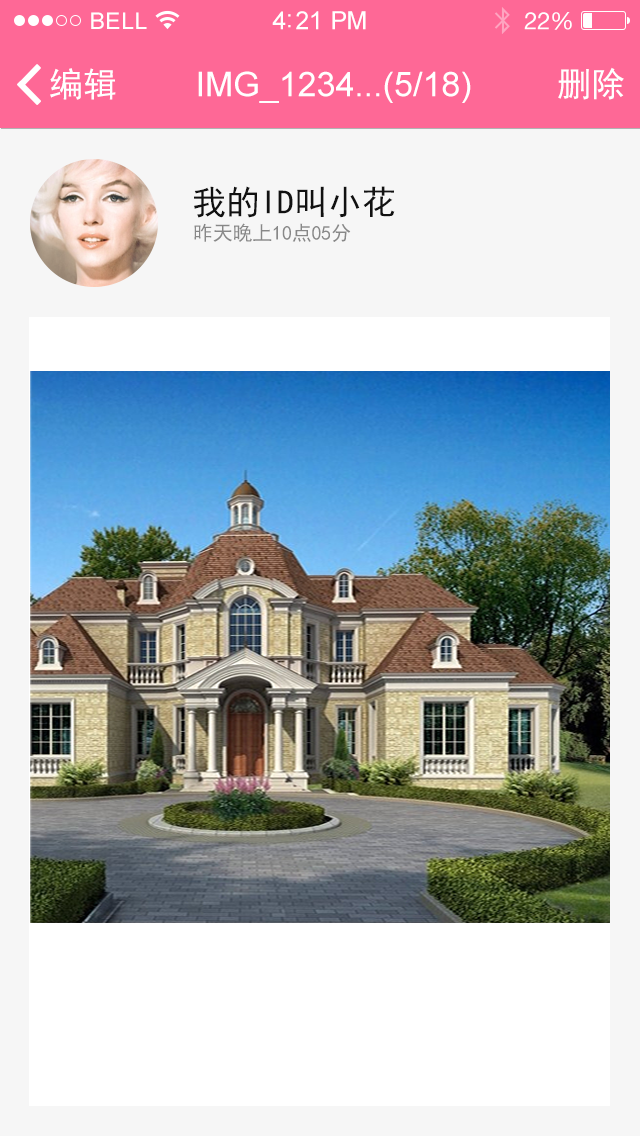
<style>
.page{position:relative;width:640px;height:1136px;background:#f6f6f6}
.page>*{position:absolute;margin:0}
.t1{font:23px "ArialMT";letter-spacing:0.02em;color:#ffffff}
.t2{font:25px "ArialMT";letter-spacing:-0.02em;color:#ffffff}
.t3{font:24px "HelveticaNeue";letter-spacing:-0.02em;color:#ffffff}
.t4{font:34px "SimHei";color:#ffffff}
.t5{font:34px "ArialMT";color:#ffffff}
.t6{font:34px "SimHei";color:#111111}
.t7{font:20px "SimHei";letter-spacing:-0.01em;color:#888888}
</style>
<div class="page">
<p class="t1" style="left:91px;top:12px;width:56px;height:17px">BELL</p>
<p class="t2" style="left:272px;top:11px;width:94px;height:19px">4:21 PM</p>
<p class="t3" style="left:524px;top:12px;width:48px;height:18px">22%</p>
<p class="t4" style="left:50px;top:68px;width:66px;height:32px">编辑</p>
<p class="t5" style="left:198px;top:71px;width:273px;height:32px">IMG_1234...(5/18)</p>
<p class="t4" style="left:558px;top:67px;width:66px;height:33px">删除</p>
<p class="t6" style="left:194px;top:186px;width:201px;height:32px">我的ID叫小花</p>
<p class="t7" style="left:194px;top:223px;width:157px;height:19px">昨天晚上10点05分</p>
</div>
